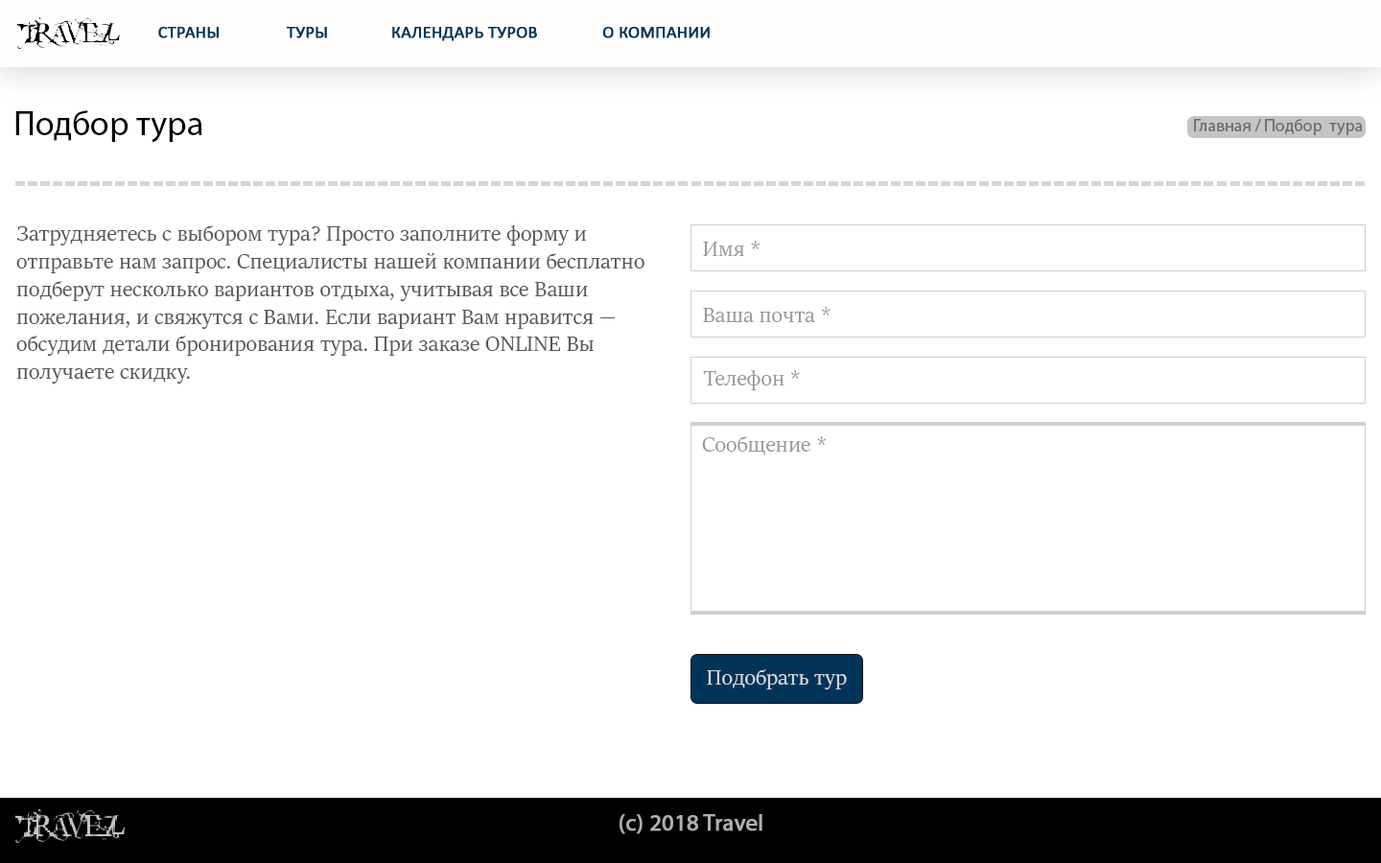
<style>
.page{position:relative;width:1381px;height:863px;background:#ffffff}
.page>*{position:absolute;margin:0}
.t1{font:34.5px "MyriadPro-Regular";color:#000000}
.t2{font:17.3px "MyriadPro-Regular";color:#6d6d6d}
.t3{font:23px "SitkaDisplay";color:#595757}
.t4{font:23px "SitkaDisplay";color:#9a9999}
.t5{font:23px "SitkaDisplay";color:#dbd7d7}
</style>
<div class="page">
<p class="t1" style="left:15px;top:110px;width:187px;height:33px">Подбор тура</p>
<p class="t2" style="left:1194px;top:119px;width:169px;height:16px">Главная / Подбор  тура</p>
<p class="t3" style="left:16px;top:225px;width:629px;height:159px">Затрудняетесь с выбором тура? Просто заполните форму и отправьте нам запрос. Специалисты нашей компании бесплатно подберут несколько вариантов отдыха, учитывая все Ваши пожелания, и свяжутся с Вами. Если вариант Вам нравится — обсудим детали бронирования тура. При заказе ONLINE Вы получаете скидку.</p>
<p class="t4" style="left:703px;top:241px;width:57px;height:15px">Имя *</p>
<p class="t4" style="left:703px;top:307px;width:128px;height:15px">Ваша почта *</p>
<p class="t4" style="left:703px;top:370px;width:97px;height:20px">Телефон *</p>
<p class="t4" style="left:702px;top:436px;width:124px;height:20px">Сообщение *</p>
<p class="t5" style="left:707px;top:670px;width:140px;height:20px">Подобрать тур</p>
</div>
